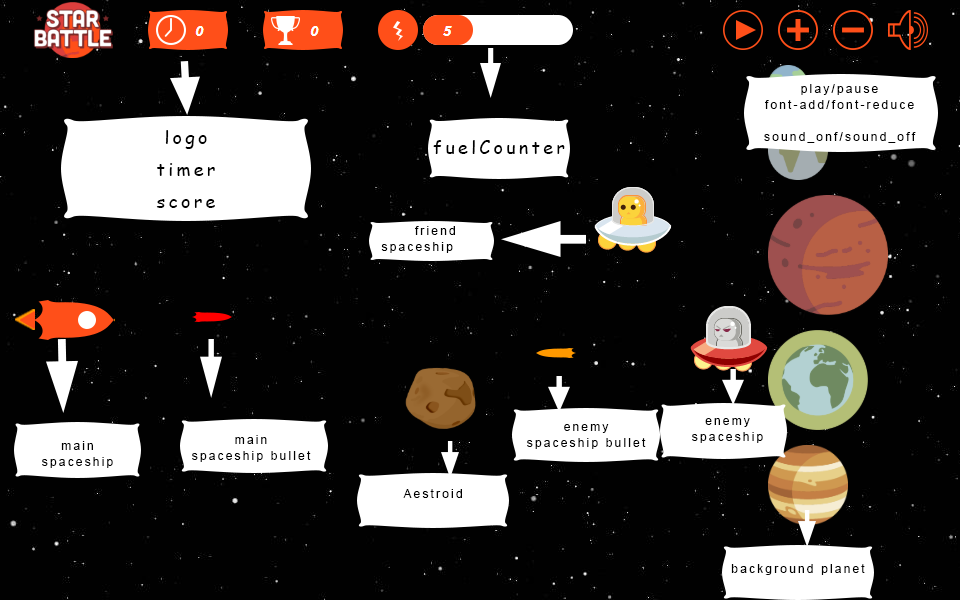
<style>
.page{position:relative;width:960px;height:600px;background:#010101}
.page>*{position:absolute;margin:0}
.t1{font:12px/16px "ArialMT";letter-spacing:0.18em;color:#000000}
.t2{font:18px/32px "ComicSansMS";letter-spacing:0.18em;color:#000000}
.t3{font:18px "ComicSansMS";letter-spacing:0.18em;color:#000000}
.t4{font:12px "ArialMT";letter-spacing:0.18em;color:#000000}
</style>
<div class="page">
<p class="t1" style="left:764px;top:84px;width:152px;height:59px;text-align:center">play/pause<br>font-add/font-reduce<br><br>sound_onf/sound_off</p>
<p class="t2" style="left:156px;top:130px;width:59px;height:78px;text-align:center">logo<br>timer<br>score</p>
<p class="t3" style="left:433px;top:140px;width:132px;height:14px">fuelCounter</p>
<p class="t1" style="left:381px;top:226px;width:74px;height:27px">friend spaceship</p>
<p class="t1" style="left:527px;top:424px;width:119px;height:25px;text-align:center">enemy spaceship bullet</p>
<p class="t1" style="left:692px;top:418px;width:71px;height:25px;text-align:center">enemy<br>spaceship</p>
<p class="t1" style="left:192px;top:435px;width:119px;height:27px;text-align:center">main spaceship bullet</p>
<p class="t1" style="left:42px;top:441px;width:71px;height:27px;text-align:center">main spaceship</p>
<p class="t4" style="left:403px;top:489px;width:59px;height:9px">Aestroid</p>
<p class="t4" style="left:731px;top:564px;width:134px;height:11px">background planet</p>
</div>
